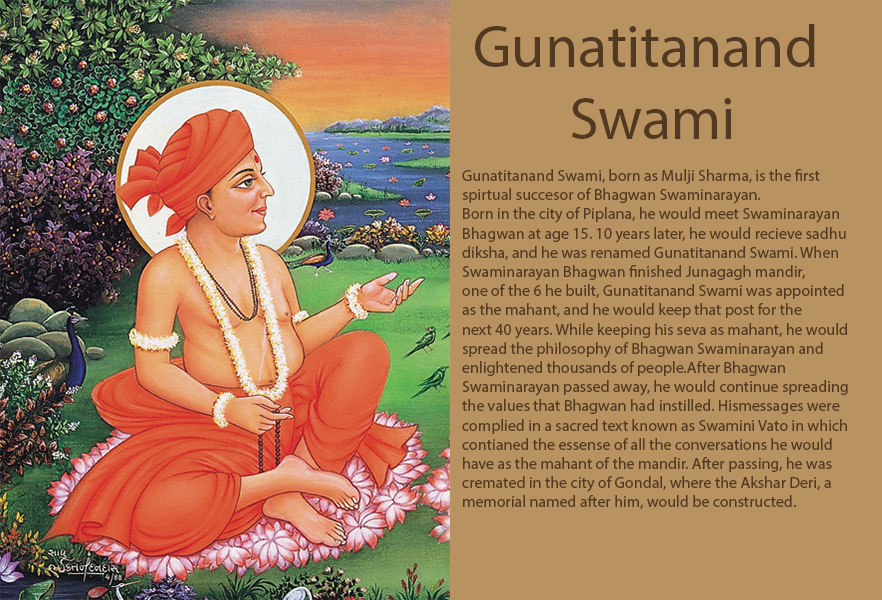
<style>
.page{position:relative;width:882px;height:600px;background:#b99262}
.page>*{position:absolute;margin:0}
.t1{font:60px "MyriadPro-Regular";color:#513922}
.t2{font:16px "MyriadPro-Regular";color:#513922}
</style>
<div class="page">
<p class="t1" style="left:475px;top:24px;width:340px;height:115px;text-align:center">Gunatitanand <br>Swami</p>
<p class="t2" style="left:462px;top:169px;width:386px;height:340px">Gunatitanand Swami, born as Mulji Sharma, is the first <br>spirtual succesor of Bhagwan Swaminarayan. <br>Born in the city of Piplana, he would meet Swaminarayan <br>Bhagwan at age 15. 10 years later, he would recieve sadhu<br>diksha, and he was renamed Gunatitanand Swami. When <br>Swaminarayan Bhagwan finished Junagagh mandir, <br>one of the 6 he built, Gunatitanand Swami was appointed <br>as the mahant, and he would keep that post for the <br>next 40 years. While keeping his seva as mahant, he would <br>spread the philosophy of Bhagwan Swaminarayan and <br>enlightened thousands of people.After Bhagwan <br>Swaminarayan passed away, he would continue spreading <br>the values that Bhagwan had instilled. Hismessages were <br>complied in a sacred text known as Swamini Vato in which <br>contianed the essense of all the conversations he would <br>have as the mahant of the mandir. After passing, he was <br>cremated in the city of Gondal, where the Akshar Deri, a <br>memorial named after him, would be constructed.</p>
</div>
